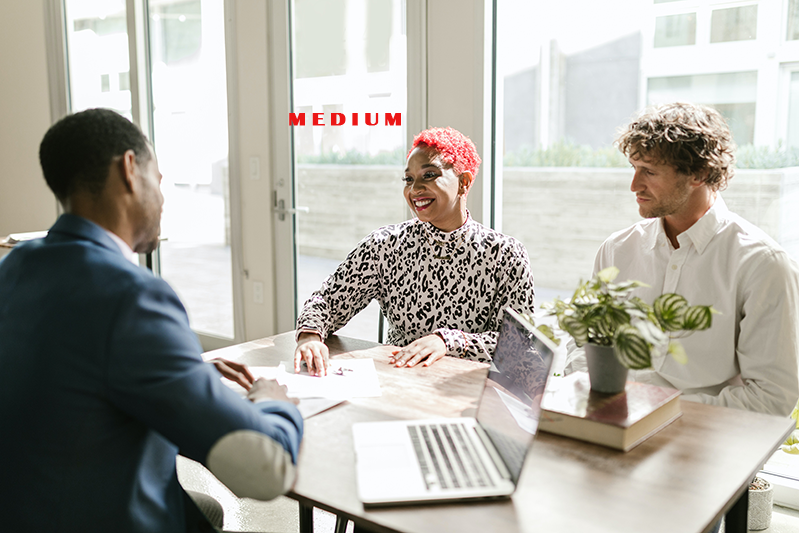
<style>
.page{position:relative;width:799px;height:533px}
.page>*{position:absolute;margin:0}
.t1{font:17.9px "BritannicBold";letter-spacing:0.2em;color:#eb1616;font-weight:bold;scale:1.35 1}
</style>
<div class="page">
<p class="t1" style="left:289px;top:113px;width:112px;height:13px">MEDIUM</p>
</div>
